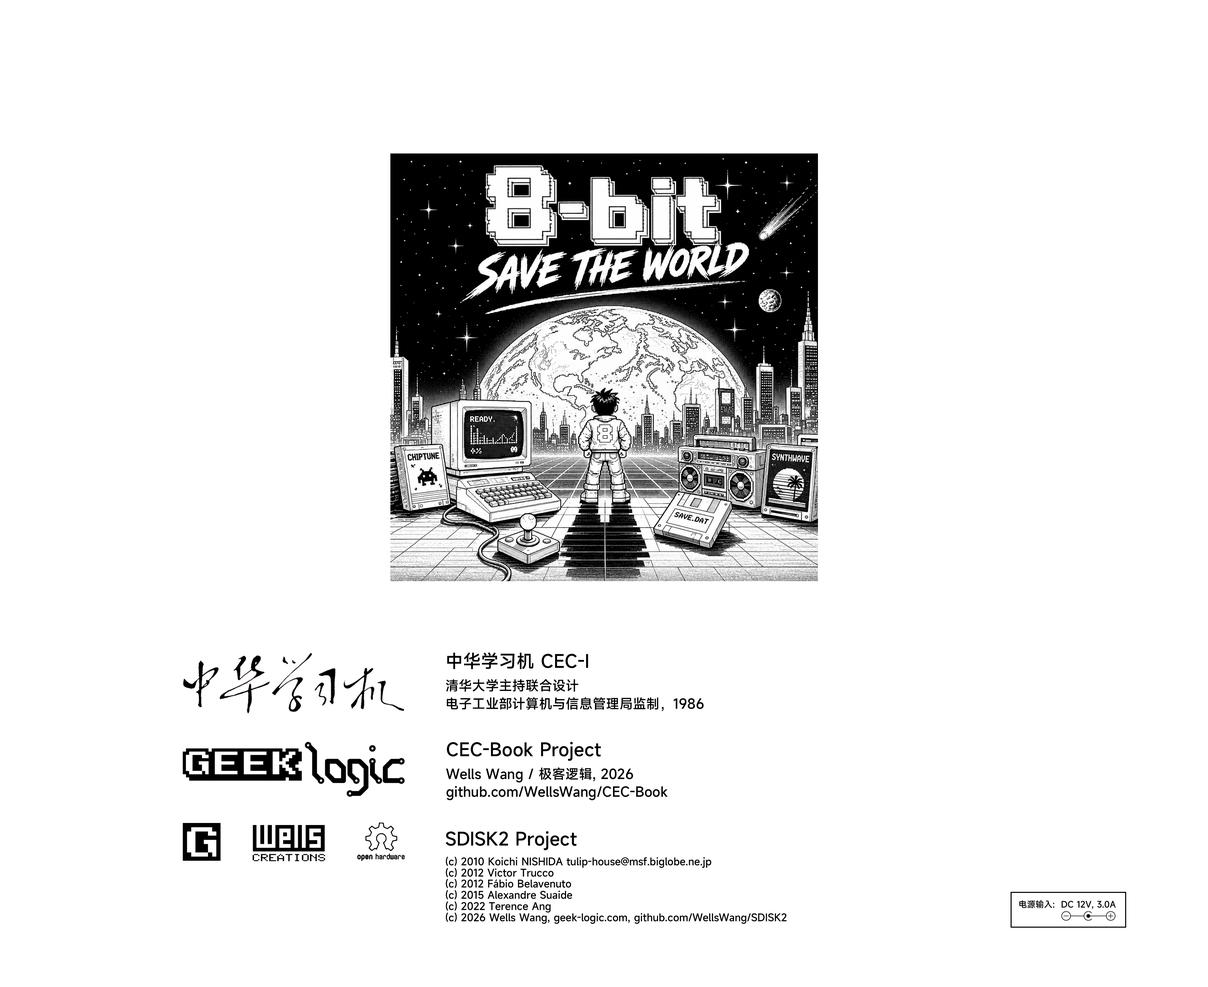
<style>
.page{position:relative;width:1208px;height:987px;background:#ffffff}
.page>*{position:absolute;margin:0}
.t1{font:13.4px/17.9px "MiSans-Medium";color:#000000}
.t2{font:17.9px/26.8px "MiSans-Medium";color:#000000}
.t3{font:10.1px/11.2px "MiSans-Medium";color:#000000}
</style>
<div class="page">
<p class="t1" style="left:446px;top:652px;width:258px;height:59px"><span class="t2">中华学习机 CEC-I<br></span>清华大学主持联合设计<br>电子工业部计算机与信息管理局监制，1986</p>
<p class="t1" style="left:446px;top:742px;width:222px;height:58px"><span class="t2">CEC-Book Project<br></span>Wells Wang / 极客逻辑, 2026<br>github.com/WellsWang/CEC-Book</p>
<p class="t3" style="left:446px;top:831px;width:341px;height:93px"><span class="t2">SDISK2 Project<br></span>(c) 2010 Koichi NISHIDA tulip-house@msf.biglobe.ne.jp<br>(c) 2012 Victor Trucco<br>(c) 2012 Fábio Belavenuto<br>(c) 2015 Alexandre Suaide<br>(c) 2022 Terence Ang<br>(c) 2026 Wells Wang, geek-logic.com, github.com/WellsWang/SDISK2</p>
</div>
